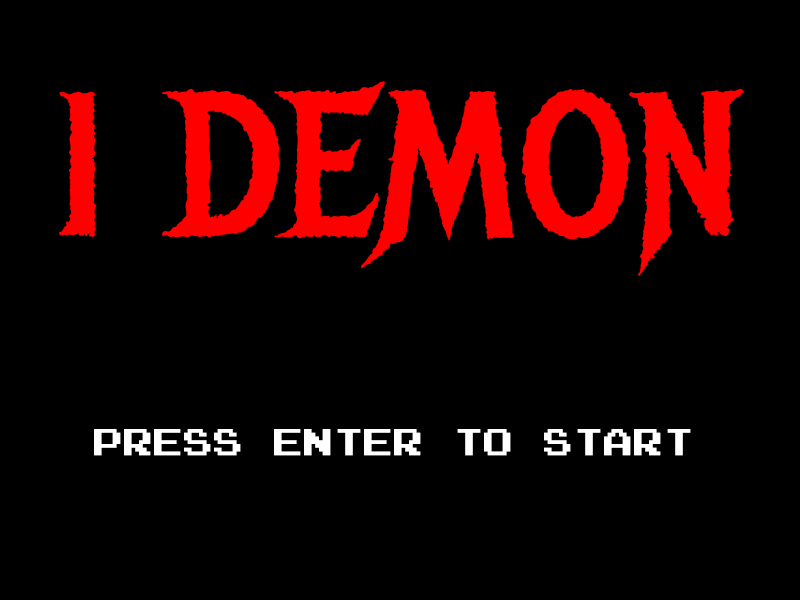
<style>
.page{position:relative;width:800px;height:600px;background:#000000}
.page>*{position:absolute;margin:0}
.t1{font:200px "MetalMania-Regular";color:#ff0000}
.t2{font:30px "PressStart2P";color:#ffffff}
</style>
<div class="page">
<p class="t1" style="left:59px;top:81px;width:686px;height:195px">I DEMON</p>
<p class="t2" style="left:94px;top:429px;width:597px;height:27px">PRESS ENTER TO START</p>
</div>
